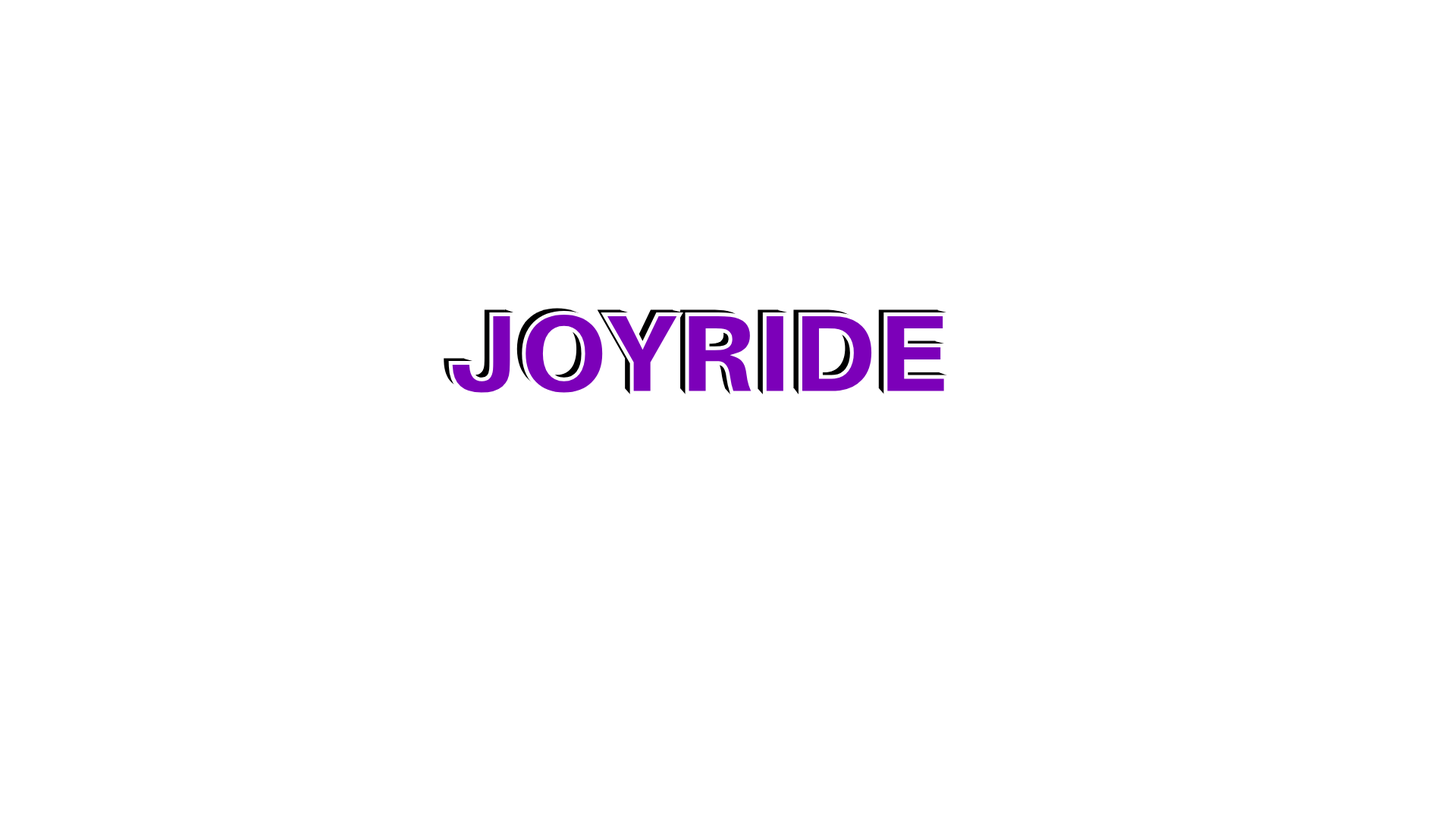
<style>
.page{position:relative;width:1456px;height:819px;background:#ffffff}
.page>*{position:absolute;margin:0}
.t1{font:113.7px "Aileron-Black";color:#7c00b9}
</style>
<div class="page">
<p class="t1" style="left:448px;top:310px;width:501px;height:87px">JOYRIDE</p>
</div>
